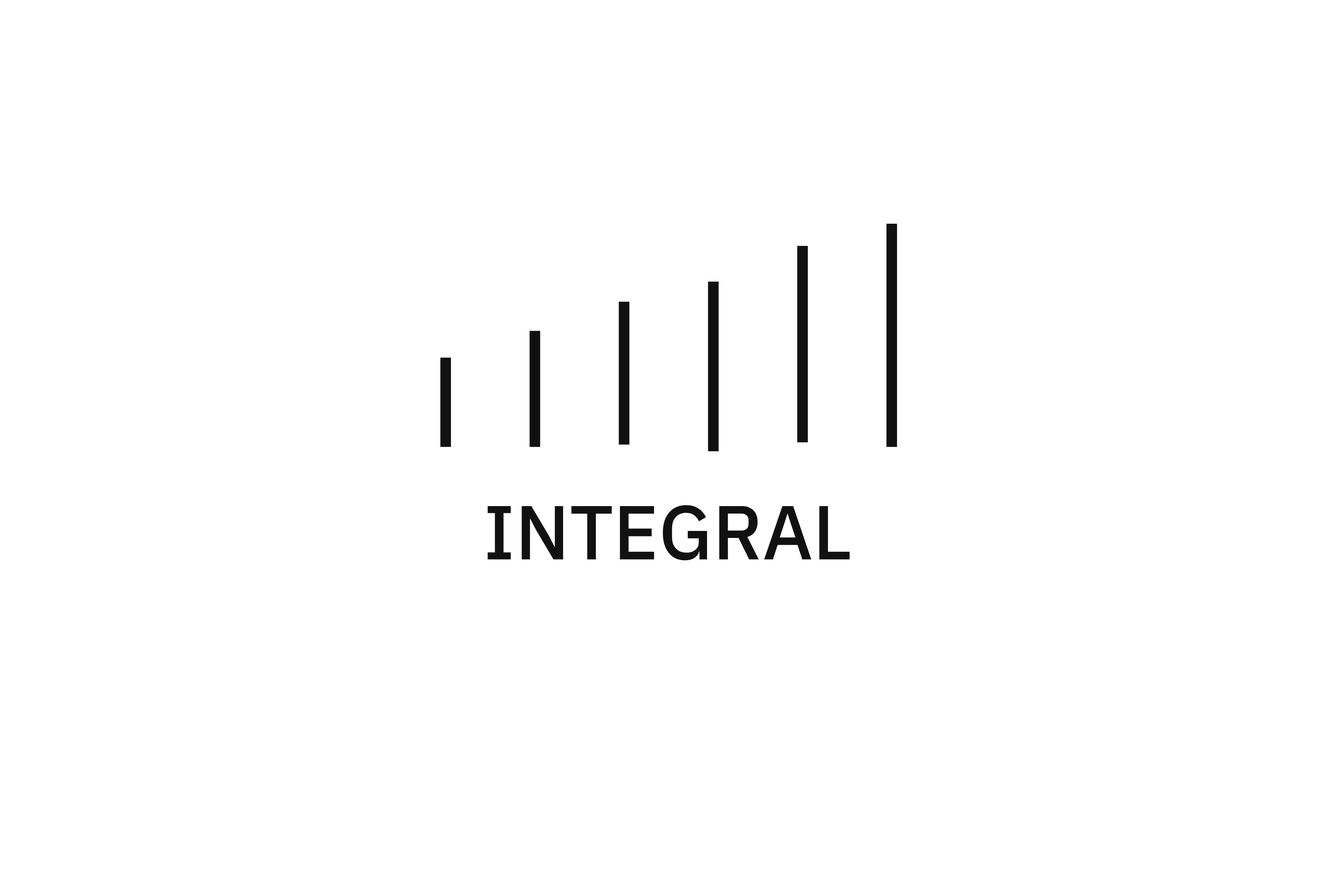
<style>
.page{position:relative;width:1337px;height:892px;background:#ffffff}
.page>*{position:absolute;margin:0}
.t1{font:76.4px "IBMPlexSans-Medium";color:#111111}
</style>
<div class="page">
<p class="t1" style="left:488px;top:505px;width:362px;height:55px">INTEGRAL</p>
</div>
